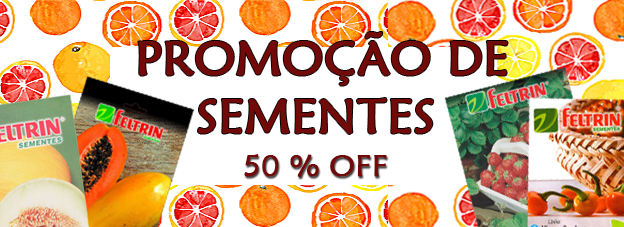
<style>
.page{position:relative;width:624px;height:227px;background:#ffffff}
.page>*{position:absolute;margin:0}
.t1{font:48px "MaiandraGD-Regular";color:#720a0a;font-weight:bold}
.t2{font:30px "MaiandraGD-Regular";color:#720a0a;font-weight:bold}
</style>
<div class="page">
<p class="t1" style="left:138px;top:32px;width:370px;height:102px">PROMOÇÃO DE<br>    SEMENTES</p>
<p class="t2" style="left:244px;top:154px;width:143px;height:23px">50 % OFF</p>
</div>
